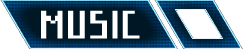
<style>
.page{position:relative;width:243px;height:50px;background:#ffffff}
.page>*{position:absolute;margin:0}
.t1{font:36.2px "Starcadia";color:#ffffff;font-weight:bold;scale:0.95 1}
</style>
<div class="page">
<p class="t1" style="left:41px;top:10px;width:99px;height:29px">MUSIC</p>
</div>
